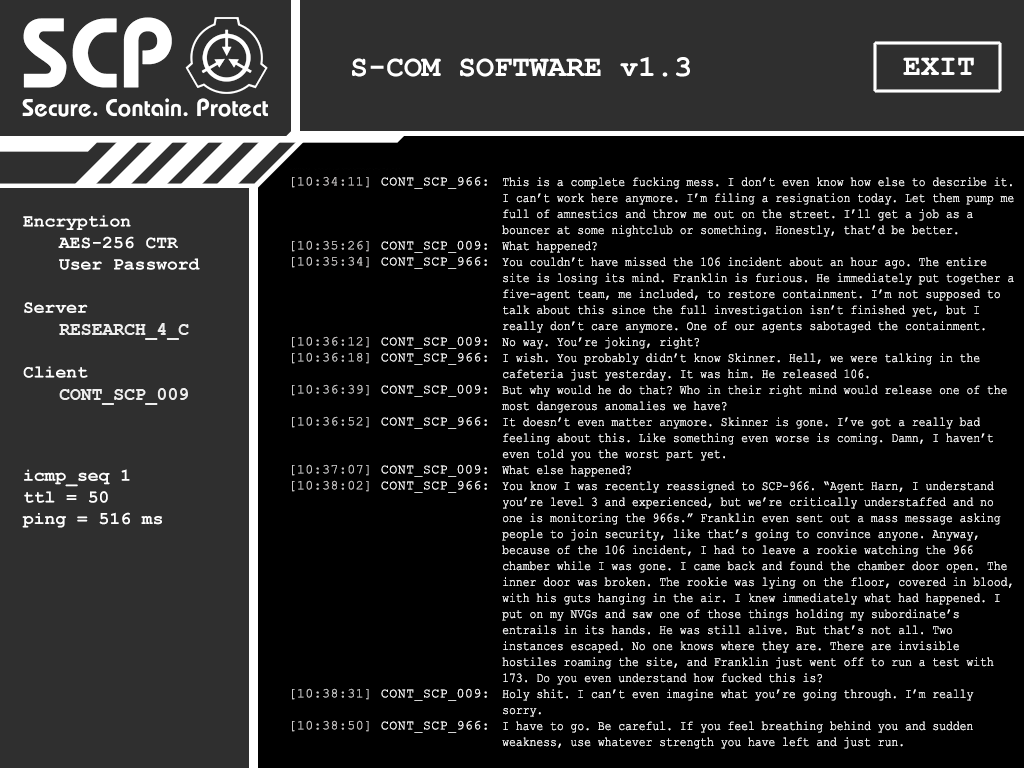
<style>
.page{position:relative;width:1024px;height:768px;background:#000000}
.page>*{position:absolute;margin:0}
.t1{font:13.3px "CourierNewPSMT";letter-spacing:0.03em;color:#ffffff}
.t2{font:13.3px "CourierNewPSMT";letter-spacing:0.03em;color:#c9c6c6}
.t3{font:13.3px "CourierNewPSMT";color:#ffffff;scale:0.85 1}
.t4{font:13.3px "CourierNewPSMT";letter-spacing:0.03em;color:#cac8c8}
.t5{font:13.3px "CourierNewPSMT";letter-spacing:0.03em;color:#cbc9c9}
.t6{font:13.3px "CourierNewPSMT";letter-spacing:0.03em;color:#cacaca}
.t7{font:13.3px "CourierNewPSMT";letter-spacing:0.03em;color:#c9c9c9}
.t8{font:13.3px "CourierNewPSMT";letter-spacing:0.03em;color:#cbcbcb}
</style>
<div class="page">
<p class="t1" style="left:292px;top:176px;width:195px;height:13px"><span class="t2">[10:34:11]</span> CONT_SCP_966:</p>
<p class="t3" style="left:502px;top:177px;width:512px;height:572px">This is a complete fucking mess. I don’t even know how else to describe it. I can’t work here anymore. I’m filing a resignation today. Let them pump me full of amnestics and throw me out on the street. I’ll get a job as a bouncer at some nightclub or something. Honestly, that’d be better.<br>What happened?<br>You couldn’t have missed the 106 incident about an hour ago. The entire site is losing its mind. Franklin is furious. He immediately put together a five-agent team, me included, to restore containment. I’m not supposed to talk about this since the full investigation isn’t finished yet, but I really don’t care anymore. One of our agents sabotaged the containment.<br>No way. You’re joking, right?<br>I wish. You probably didn’t know Skinner. Hell, we were talking in the cafeteria just yesterday. It was him. He released 106.<br>But why would he do that? Who in their right mind would release one of the most dangerous anomalies we have?<br>It doesn’t even matter anymore. Skinner is gone. I’ve got a really bad feeling about this. Like something even worse is coming. Damn, I haven’t even told you the worst part yet.<br>What else happened?<br>You know I was recently reassigned to SCP-966. “Agent Harn, I understand you’re level 3 and experienced, but we’re critically understaffed and no one is monitoring the 966s.” Franklin even sent out a mass message asking people to join security, like that’s going to convince anyone. Anyway, because of the 106 incident, I had to leave a rookie watching the 966 chamber while I was gone. I came back and found the chamber door open. The inner door was broken. The rookie was lying on the floor, covered in blood, with his guts hanging in the air. I knew immediately what had happened. I put on my NVGs and saw one of those things holding my subordinate’s entrails in its hands. He was still alive. But that’s not all. Two instances escaped. No one knows where they are. There are invisible hostiles roaming the site, and Franklin just went off to run a test with 173. Do you even understand how fucked this is?<br>Holy shit. I can’t even imagine what you’re going through. I’m really sorry.<br>I have to go. Be careful. If you feel breathing behind you and sudden weakness, use whatever strength you have left and just run.</p>
<p class="t1" style="left:292px;top:240px;width:195px;height:13px"><span class="t4">[10:35:26]</span> CONT_SCP_009:</p>
<p class="t1" style="left:292px;top:256px;width:195px;height:13px"><span class="t5">[10:35:34]</span> CONT_SCP_966:</p>
<p class="t1" style="left:292px;top:336px;width:195px;height:13px"><span class="t5">[10:36:12]</span> CONT_SCP_009:</p>
<p class="t1" style="left:292px;top:352px;width:195px;height:13px"><span class="t6">[10:36:18]</span> CONT_SCP_966:</p>
<p class="t1" style="left:292px;top:384px;width:195px;height:13px"><span class="t7">[10:36:39]</span> CONT_SCP_009:</p>
<p class="t1" style="left:292px;top:416px;width:195px;height:13px"><span class="t7">[10:36:52]</span> CONT_SCP_966:</p>
<p class="t1" style="left:292px;top:464px;width:195px;height:13px"><span class="t7">[10:37:07]</span> CONT_SCP_009:</p>
<p class="t1" style="left:292px;top:480px;width:195px;height:13px"><span class="t4">[10:38:02]</span> CONT_SCP_966:</p>
<p class="t1" style="left:292px;top:688px;width:195px;height:13px"><span class="t8">[10:38:31]</span> CONT_SCP_009:</p>
<p class="t1" style="left:292px;top:720px;width:195px;height:13px"><span class="t4">[10:38:50]</span> CONT_SCP_966:</p>
</div>
